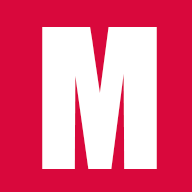
<style>
.page{position:relative;width:192px;height:192px;background:#d9083c}
.page>*{position:absolute;margin:0}
.t1{font:180px "Impact";color:#ffffff}
</style>
<div class="page">
<p class="t1" style="left:42px;top:27px;width:115px;height:142px">M</p>
</div>
